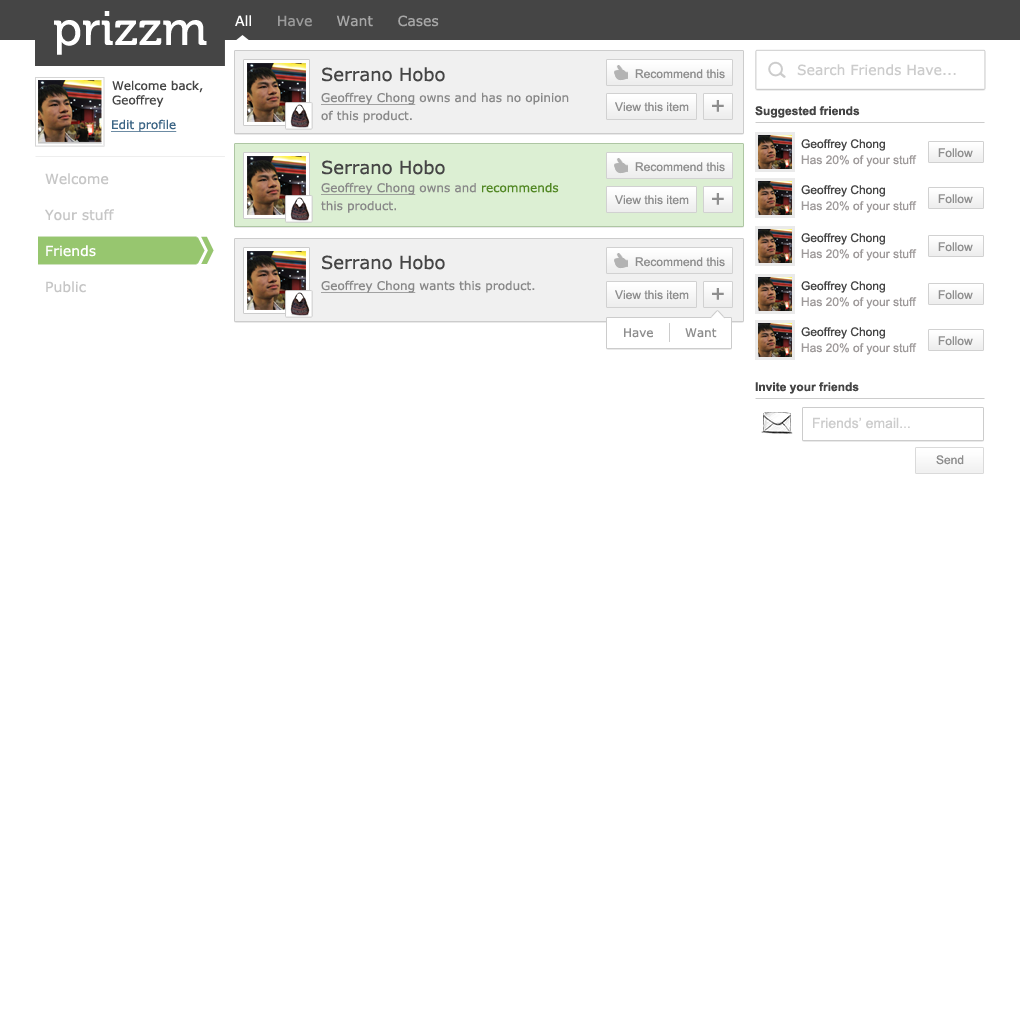
<style>
.page{position:relative;width:1020px;height:1020px;background:#ffffff}
.page>*{position:absolute;margin:0}
.t1{font:48px "Museo-500";color:#ffffff}
.t2{font:14px "Verdana";color:#a7a7a7}
.t3{font:14px "Verdana";color:#ffffff}
.t4{font:14px "Verdana";color:#9b9b9b}
.t5{font:14px "Verdana";color:#cccccc}
.t6{font:18px "Verdana";color:#454545}
.t7{font:12px "ArialMT";color:#8e8e8e}
.t8{font:12px "Verdana";color:#454545}
.t9{font:12px/18px "Verdana";color:#888888}
.t10{font:12px/18px "Verdana";color:#888888;text-decoration:underline}
.t11{font:24px "ArialMT";color:#8e8e8e}
.t12{font:12px "Arial-BoldMT";color:#444444}
.t13{font:12px "Verdana";color:#3c6585;text-decoration:underline}
.t14{font:12px "ArialMT";color:#444444}
.t15{font:12px "ArialMT";color:#9d9999}
.t16{font:12px/18px "Verdana";color:#518723}
.t17{font:12px "Verdana";color:#888888}
.t18{font:12px "Verdana";color:#888888;text-decoration:underline}
.t19{font:12px "Verdana";color:#8e8e8e}
.t20{font:14px "ArialMT";color:#cccccc}
</style>
<div class="page">
<p class="t1" style="left:54px;top:11px;width:153px;height:44px">prizzm</p>
<p class="t2" style="left:235px;top:15px;width:204px;height:12px"><span class="t3">All     </span><span class="t4">Have     </span>Want     Cases</p>
<p class="t5" style="left:797px;top:64px;width:159px;height:12px">Search Friends Have...</p>
<p class="t6" style="left:322px;top:67px;width:123px;height:15px">Serrano Hobo</p>
<p class="t7" style="left:635px;top:69px;width:90px;height:10px">Recommend this</p>
<p class="t8" style="left:112px;top:80px;width:91px;height:27px">Welcome back,<br>Geoffrey</p>
<p class="t9" style="left:321px;top:92px;width:248px;height:31px"><span class="t10">Geoffrey Chong</span> owns and has no opinion<br>of this product.</p>
<p class="t7" style="left:615px;top:102px;width:74px;height:10px">View this item</p>
<p class="t11" style="left:712px;top:100px;width:12px;height:12px">+</p>
<p class="t12" style="left:755px;top:106px;width:105px;height:12px">Suggested friends</p>
<p class="t13" style="left:111px;top:119px;width:66px;height:13px">Edit profile</p>
<p class="t14" style="left:801px;top:139px;width:84px;height:12px">Geoffrey Chong</p>
<p class="t7" style="left:938px;top:148px;width:35px;height:10px">Follow</p>
<p class="t6" style="left:322px;top:160px;width:123px;height:15px">Serrano Hobo</p>
<p class="t15" style="left:801px;top:155px;width:116px;height:12px">Has 20% of your stuff</p>
<p class="t7" style="left:635px;top:162px;width:90px;height:10px">Recommend this</p>
<p class="t10" style="left:321px;top:182px;width:238px;height:31px">Geoffrey Chong<span class="t9"> owns and </span><span class="t16">recommends</span><span class="t9"> this product.</span></p>
<p class="t14" style="left:801px;top:185px;width:84px;height:12px">Geoffrey Chong</p>
<p class="t7" style="left:615px;top:195px;width:74px;height:10px">View this item</p>
<p class="t11" style="left:712px;top:193px;width:12px;height:12px">+</p>
<p class="t7" style="left:938px;top:194px;width:35px;height:10px">Follow</p>
<p class="t15" style="left:801px;top:201px;width:116px;height:12px">Has 20% of your stuff</p>
<p class="t14" style="left:801px;top:233px;width:84px;height:12px">Geoffrey Chong</p>
<p class="t7" style="left:938px;top:242px;width:35px;height:10px">Follow</p>
<p class="t6" style="left:322px;top:255px;width:123px;height:15px">Serrano Hobo</p>
<p class="t7" style="left:635px;top:257px;width:90px;height:10px">Recommend this</p>
<p class="t15" style="left:801px;top:249px;width:116px;height:12px">Has 20% of your stuff</p>
<p class="t17" style="left:321px;top:280px;width:214px;height:13px"><span class="t18">Geoffrey Chong</span> wants this product.</p>
<p class="t14" style="left:801px;top:281px;width:84px;height:12px">Geoffrey Chong</p>
<p class="t7" style="left:615px;top:290px;width:74px;height:10px">View this item</p>
<p class="t11" style="left:712px;top:288px;width:12px;height:12px">+</p>
<p class="t7" style="left:938px;top:290px;width:35px;height:10px">Follow</p>
<p class="t15" style="left:801px;top:297px;width:116px;height:12px">Has 20% of your stuff</p>
<p class="t19" style="left:624px;top:328px;width:29px;height:10px">Have</p>
<p class="t19" style="left:685px;top:328px;width:32px;height:10px">Want</p>
<p class="t14" style="left:801px;top:327px;width:84px;height:12px">Geoffrey Chong</p>
<p class="t7" style="left:938px;top:336px;width:35px;height:10px">Follow</p>
<p class="t15" style="left:801px;top:343px;width:116px;height:12px">Has 20% of your stuff</p>
<p class="t12" style="left:755px;top:382px;width:104px;height:12px">Invite your friends</p>
<p class="t20" style="left:813px;top:417px;width:97px;height:12px">Friends’ email...</p>
<p class="t7" style="left:936px;top:455px;width:28px;height:10px">Send</p>
</div>
